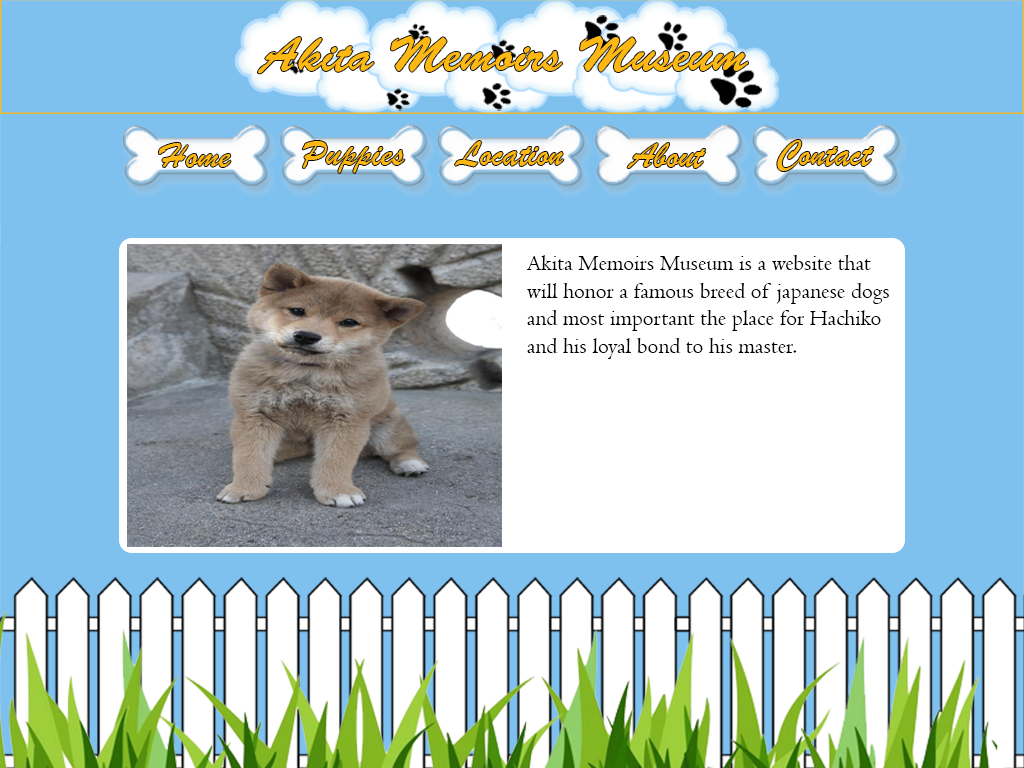
<style>
.page{position:relative;width:1024px;height:768px;background:#7ec0ee}
.page>*{position:absolute;margin:0}
.t1{font:48px "BrushScriptStd";color:#fdb813}
.t2{font:38.4px "BrushScriptMT";color:#fdb813}
.t3{font:23px "Centaur";color:#000000}
</style>
<div class="page">
<p class="t1" style="left:258px;top:36px;width:490px;height:38px">Akita Memoirs Museum</p>
<p class="t2" style="left:158px;top:143px;width:73px;height:24px">Home</p>
<p class="t2" style="left:302px;top:141px;width:103px;height:32px">Puppies</p>
<p class="t2" style="left:455px;top:141px;width:109px;height:26px">Location</p>
<p class="t2" style="left:627px;top:143px;width:79px;height:25px">About</p>
<p class="t2" style="left:777px;top:140px;width:97px;height:31px">Contact</p>
<p class="t3" style="left:527px;top:255px;width:362px;height:104px">Akita Memoirs Museum is a website that will honor a famous breed of japanese dogs and most important the place for Hachiko and his loyal bond to his master.</p>
</div>
